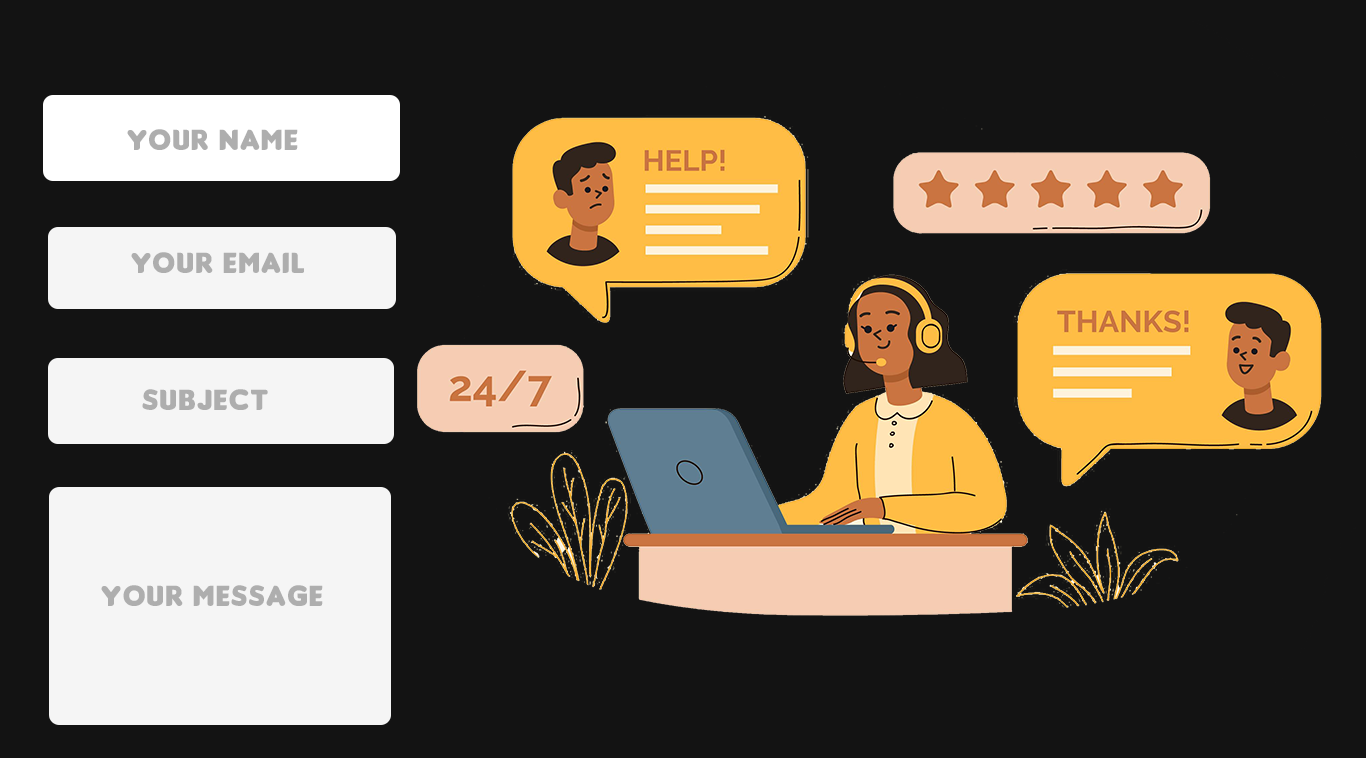
<style>
.page{position:relative;width:1366px;height:758px;background:#131313}
.page>*{position:absolute;margin:0}
.t1{font:30.5px "Insaniburger-with-Cheese";letter-spacing:0.05em;color:#aeaeae}
.t2{font:12px "Insaniburger-with-Cheese";letter-spacing:0.05em;color:#aeaeae}
</style>
<div class="page">
<p class="t1" style="left:127px;top:129px;width:171px;height:21px">Your Name</p>
<p class="t1" style="left:131px;top:252px;width:173px;height:21px">Your Email</p>
<p class="t2" style="left:142px;top:389px;width:126px;height:21px;text-align:center">Subject</p>
<p class="t2" style="left:101px;top:585px;width:222px;height:21px;text-align:center">Your MEssage</p>
</div>
